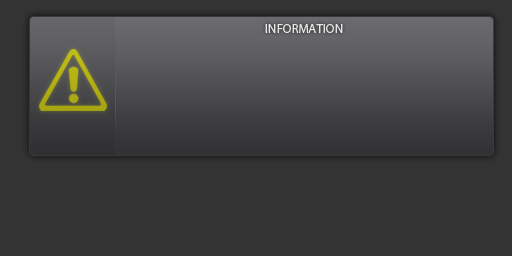
<style>
.page{position:relative;width:512px;height:256px;background:#333333}
.page>*{position:absolute;margin:0}
.t1{font:13px "MyriadPro-Regular";color:#e7e7e7}
</style>
<div class="page">
<p class="t1" style="left:265px;top:24px;width:78px;height:9px">INFORMATION</p>
</div>
